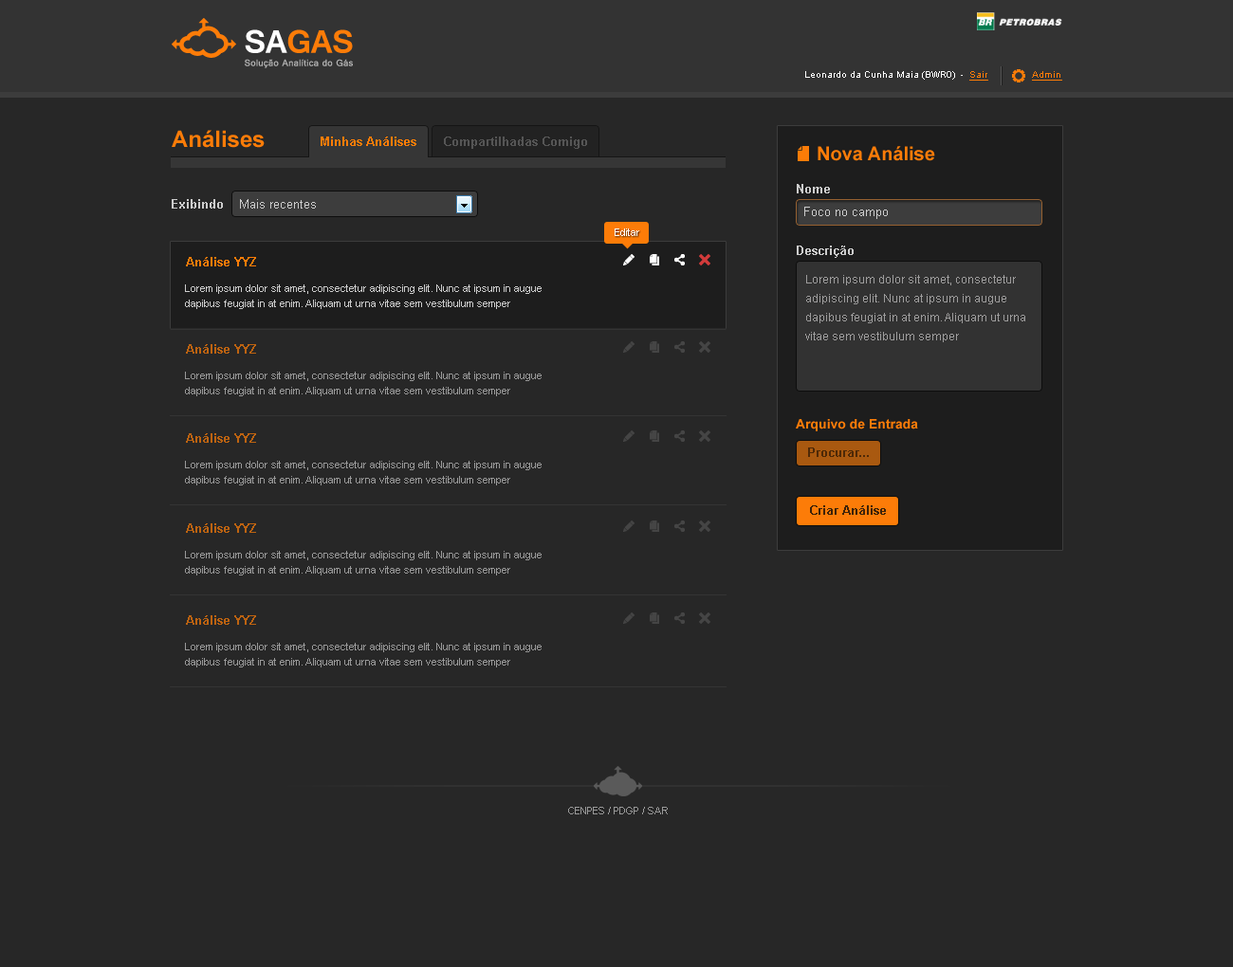
<style>
.page{position:relative;width:1233px;height:967px;background:#272727}
.page>*{position:absolute;margin:0}
.t1{font:9.5px "ArialMT";color:#ffffff}
.t2{font:9.5px "ArialMT";color:#fc7c08;text-decoration:underline}
.t3{font:22.8px "Arial-BoldMT";color:#fc7c08}
.t4{font:12.3px "Arial-BoldMT";color:#fc7c08}
.t5{font:12.3px "Arial-BoldMT";color:#555555}
.t6{font:19px "Arial-BoldMT";color:#fc7c08}
.t7{font:12.3px "Arial-BoldMT";color:#cccccc}
.t8{font:12.3px "ArialMT";color:#cccccc}
.t9{font:10.4px "ArialMT";color:#ffffff}
.t10{font:11.4px/19px "ArialMT";color:#9e9d9d}
.t11{font:10.4px/15.2px "ArialMT";color:#cccccc}
.t12{font:12.3px "Arial-BoldMT";color:#bd6311}
.t13{font:10.4px/15.2px "ArialMT";color:#999999}
.t14{font:13.3px "Arial-BoldMT";color:#fc7c08}
.t15{font:12.3px "Arial-BoldMT";color:#4e2907}
.t16{font:12.3px "Arial-BoldMT";color:#3e2209}
.t17{font:10.4px "ArialMT";color:#999999}
</style>
<div class="page">
<p class="t1" style="left:805px;top:71px;width:183px;height:10px">Leonardo da Cunha Maia (BWR0)  -  <span class="t2">Sair</span></p>
<p class="t2" style="left:1032px;top:71px;width:30px;height:10px">Admin</p>
<p class="t3" style="left:172px;top:130px;width:93px;height:18px">Análises</p>
<p class="t4" style="left:321px;top:137px;width:95px;height:9px">Minhas Análises</p>
<p class="t5" style="left:444px;top:137px;width:143px;height:12px">Compartilhadas Comigo</p>
<p class="t6" style="left:817px;top:146px;width:118px;height:15px">Nova Análise</p>
<p class="t7" style="left:797px;top:184px;width:33px;height:9px">Nome</p>
<p class="t7" style="left:172px;top:199px;width:51px;height:10px">Exibindo</p>
<p class="t8" style="left:240px;top:199px;width:76px;height:10px">Mais recentes</p>
<p class="t8" style="left:804px;top:207px;width:84px;height:12px">Foco no campo</p>
<p class="t9" style="left:614px;top:229px;width:25px;height:7px">Editar</p>
<p class="t7" style="left:797px;top:246px;width:56px;height:12px">Descrição</p>
<p class="t4" style="left:186px;top:257px;width:70px;height:9px">Análise YYZ</p>
<p class="t10" style="left:805px;top:275px;width:220px;height:67px">Lorem ipsum dolor sit amet, consectetur adipiscing elit. Nunc at ipsum in augue dapibus feugiat in at enim. Aliquam ut urna vitae sem vestibulum semper</p>
<p class="t11" style="left:185px;top:284px;width:356px;height:25px">Lorem ipsum dolor sit amet, consectetur adipiscing elit. Nunc at ipsum in augue dapibus feugiat in at enim. Aliquam ut urna vitae sem vestibulum semper</p>
<p class="t12" style="left:186px;top:344px;width:70px;height:10px">Análise YYZ</p>
<p class="t13" style="left:185px;top:372px;width:356px;height:24px">Lorem ipsum dolor sit amet, consectetur adipiscing elit. Nunc at ipsum in augue dapibus feugiat in at enim. Aliquam ut urna vitae sem vestibulum semper</p>
<p class="t14" style="left:796px;top:419px;width:122px;height:12px">Arquivo de Entrada</p>
<p class="t15" style="left:808px;top:448px;width:61px;height:9px">Procurar...</p>
<p class="t16" style="left:810px;top:505px;width:76px;height:10px">Criar Análise</p>
<p class="t17" style="left:568px;top:807px;width:100px;height:8px">CENPES / PDGP / SAR</p>
</div>
